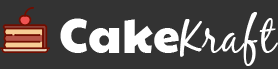
<style>
.page{position:relative;width:278px;height:69px;background:#333333}
.page>*{position:absolute;margin:0}
.t1{font:48px "BlackJackRegular";letter-spacing:0.005em;color:#ffffff}
.t2{font:48px "PaytoneOne-Regular";letter-spacing:0.005em;color:#ffffff}
</style>
<div class="page">
<p class="t1" style="left:60px;top:12px;width:218px;height:54px"><span class="t2">Cake</span>Kraft</p>
</div>
